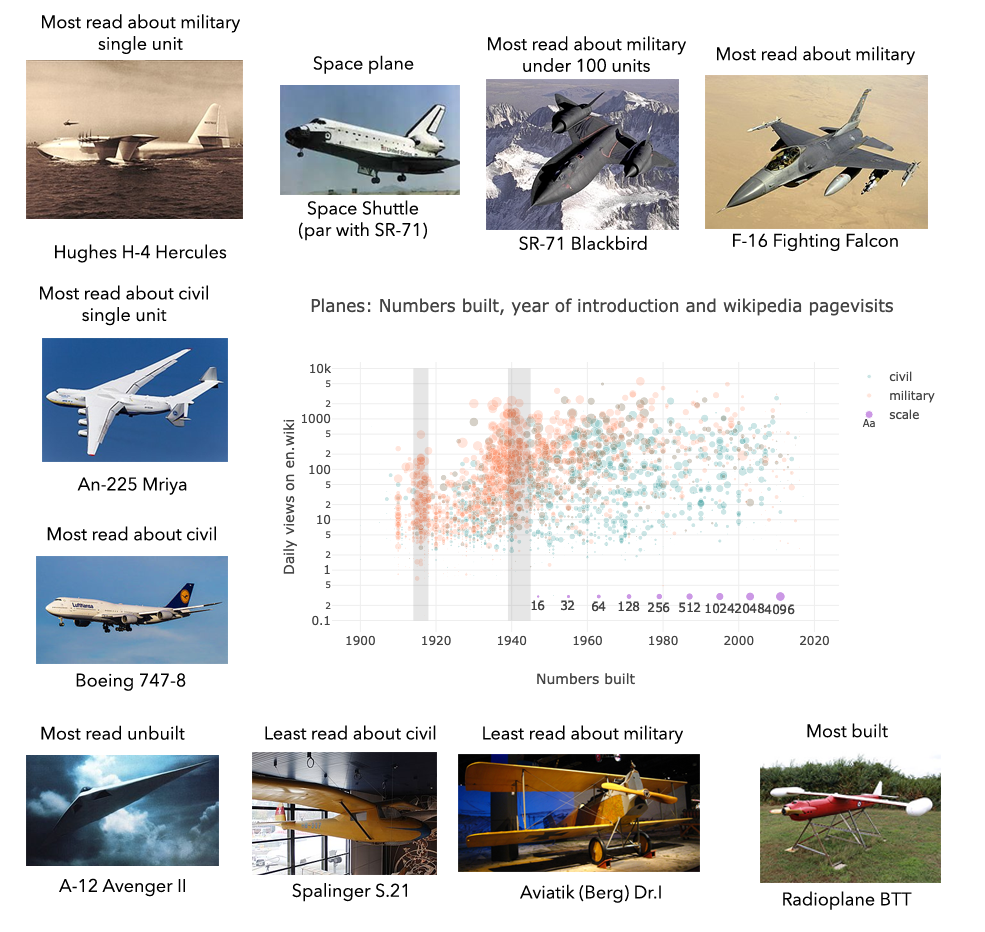
<style>
.page{position:relative;width:985px;height:932px;background:#ffffff}
.page>*{position:absolute;margin:0}
.t1{font:18px "AvenirNext-Regular";color:#000000}
</style>
<div class="page">
<p class="t1" style="left:42px;top:14px;width:198px;height:40px;text-align:center">Most read about military<br>single unit</p>
<p class="t1" style="left:488px;top:36px;width:198px;height:36px;text-align:center">Most read about military<br>under 100 units</p>
<p class="t1" style="left:717px;top:46px;width:198px;height:19px">Most read about military</p>
<p class="t1" style="left:313px;top:55px;width:101px;height:19px">Space plane</p>
<p class="t1" style="left:299px;top:200px;width:128px;height:41px;text-align:center">Space Shuttle<br>(par with SR-71)</p>
<p class="t1" style="left:733px;top:233px;width:165px;height:19px">F-16 Fighting Falcon</p>
<p class="t1" style="left:55px;top:244px;width:172px;height:19px">Hughes H-4 Hercules</p>
<p class="t1" style="left:519px;top:235px;width:128px;height:15px">SR-71 Blackbird</p>
<p class="t1" style="left:40px;top:285px;width:168px;height:41px;text-align:center">Most read about civil<br>single unit</p>
<p class="t1" style="left:77px;top:477px;width:110px;height:18px">An-225 Mriya</p>
<p class="t1" style="left:47px;top:526px;width:169px;height:15px">Most read about civil</p>
<p class="t1" style="left:76px;top:673px;width:110px;height:18px">Boeing 747-8</p>
<p class="t1" style="left:41px;top:725px;width:144px;height:15px">Most read unbuilt</p>
<p class="t1" style="left:265px;top:725px;width:171px;height:15px">Least read about civil</p>
<p class="t1" style="left:483px;top:725px;width:200px;height:19px">Least read about military</p>
<p class="t1" style="left:807px;top:723px;width:81px;height:15px">Most built</p>
<p class="t1" style="left:59px;top:878px;width:126px;height:19px">A-12 Avenger II</p>
<p class="t1" style="left:292px;top:883px;width:115px;height:19px">Spalinger S.21</p>
<p class="t1" style="left:520px;top:884px;width:141px;height:19px">Aviatik (Berg) Dr.I</p>
<p class="t1" style="left:783px;top:891px;width:129px;height:19px">Radioplane BTT</p>
</div>
